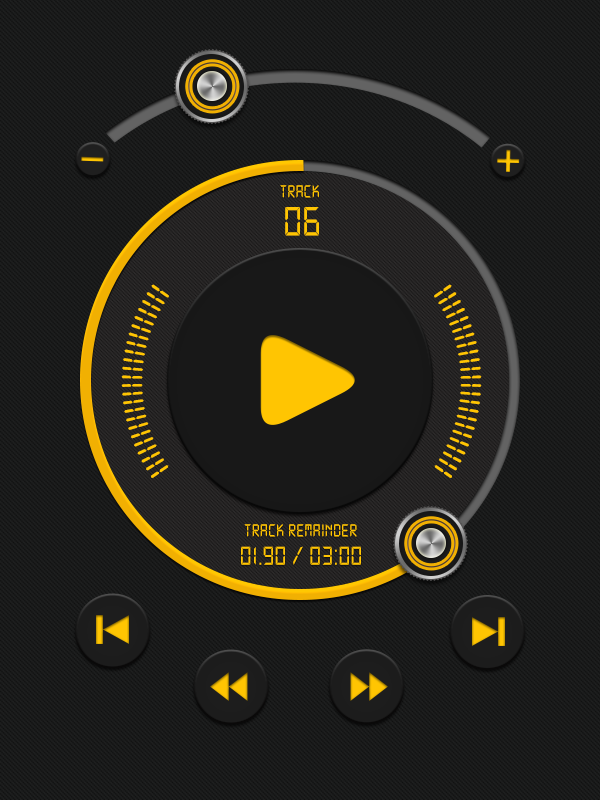
<style>
.page{position:relative;width:600px;height:800px}
.page>*{position:absolute;margin:0}
.t1{font:33.1px "DS-Digital";color:#ffc502;scale:0.86 1}
.t2{font:77.6px "DS-Digital";color:#ffc502;scale:0.86 1}
.t3{font:53.5px "DS-Digital";color:#ffc502;scale:0.87 1}
.t4{font:32.9px "DS-Digital";color:#ffc502;scale:0.86 1}
.t5{font:48.5px "DS-Digital";color:#ffc502;scale:0.86 1}
</style>
<div class="page">
<p class="t1" style="left:280px;top:185px;width:39px;height:13px">Track</p>
<p class="t2" style="left:285px;top:207px;width:34px;height:29px">06</p>
<p class="t3" style="left:121px;top:284px;width:48px;height:194px;rotate:90deg">iiiiiiiiiiiiiiiiiiiiiiii</p>
<p class="t3" style="left:434px;top:284px;width:48px;height:194px;rotate:90deg">iiiiiiiiiiiiiiiiiiiiiiii</p>
<p class="t4" style="left:244px;top:524px;width:113px;height:13px">Track remainder</p>
<p class="t5" style="left:241px;top:546px;width:120px;height:19px">01.90 / 03:00</p>
</div>
